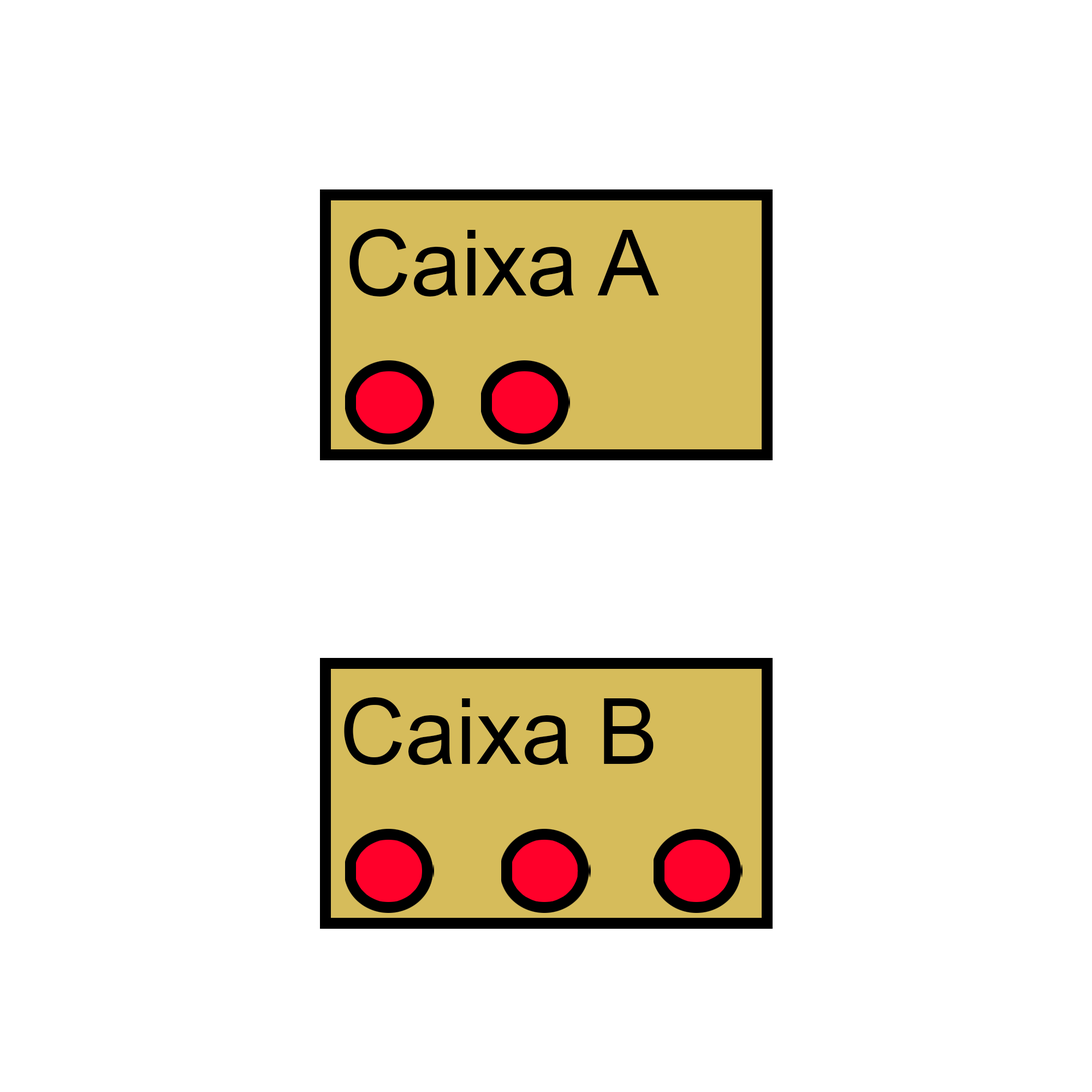
<style>
.page{position:relative;width:1092px;height:1092px;background:#ffffff}
.page>*{position:absolute;margin:0}
.t1{font:91px "ArialMT";color:#000000}
</style>
<div class="page">
<p class="t1" style="left:349px;top:229px;width:310px;height:67px">Caixa A</p>
<p class="t1" style="left:344px;top:697px;width:310px;height:68px">Caixa B</p>
</div>
